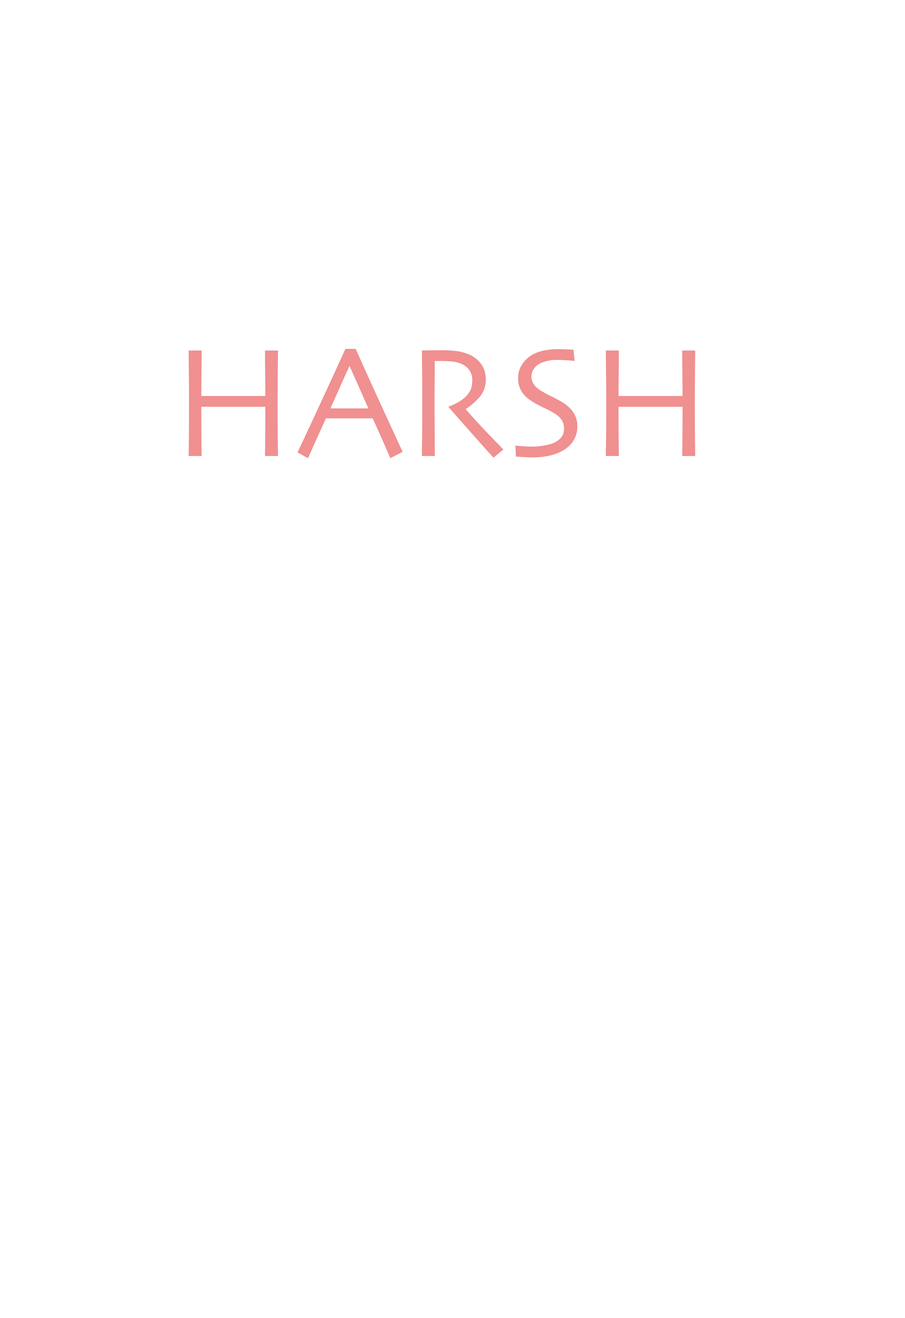
<style>
.page{position:relative;width:905px;height:1318px;background:#ffffff}
.page>*{position:absolute;margin:0}
.t1{font:161.5px "Skia-Regular";color:#f09090}
</style>
<div class="page">
<p class="t1" style="left:188px;top:349px;width:507px;height:109px">HARSH</p>
</div>
